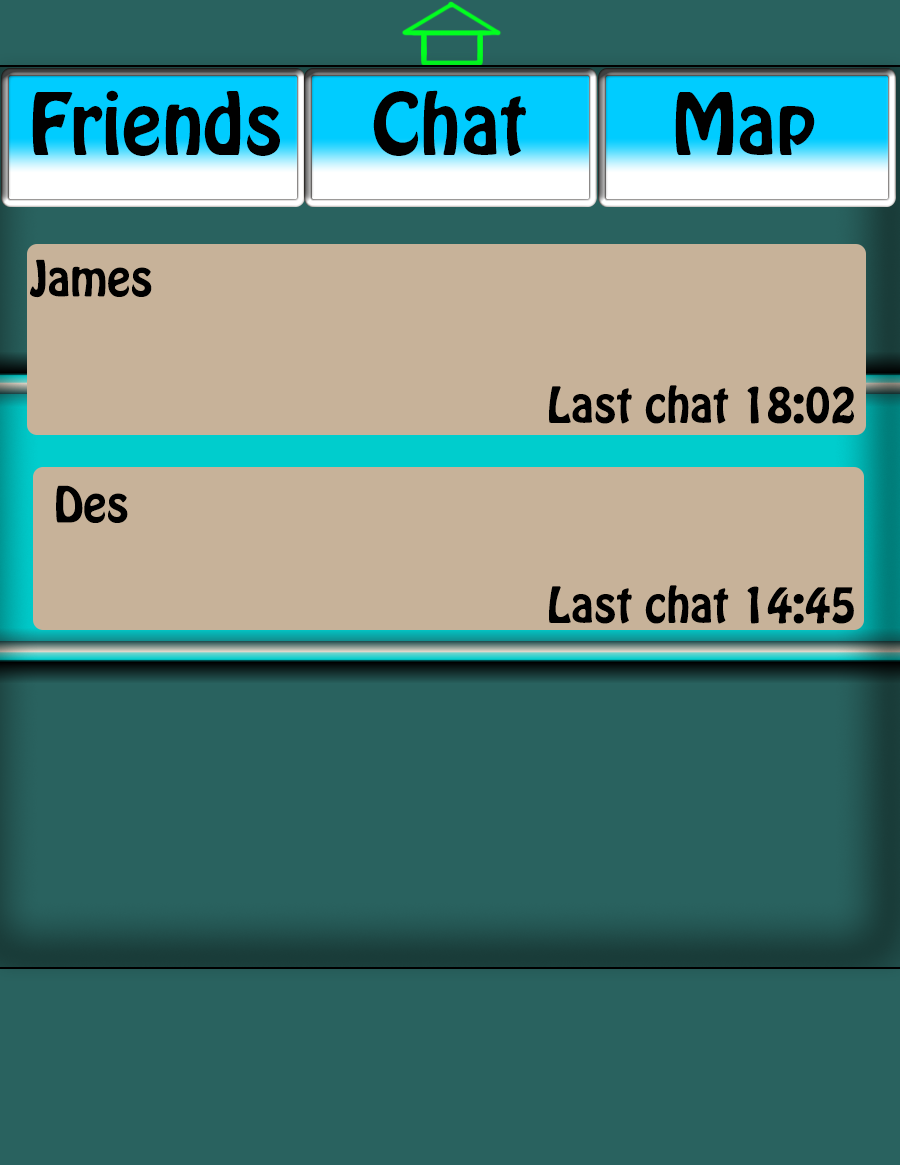
<style>
.page{position:relative;width:900px;height:1165px;background:#29625f}
.page>*{position:absolute;margin:0}
.t1{font:75.1px "HoboStd";color:#000000}
.t2{font:43.8px "HoboStd";color:#000000}
</style>
<div class="page">
<p class="t1" style="left:32px;top:90px;width:248px;height:66px">Friends</p>
<p class="t1" style="left:373px;top:90px;width:153px;height:66px">Chat</p>
<p class="t1" style="left:675px;top:92px;width:140px;height:63px">Map</p>
<p class="t2" style="left:30px;top:259px;width:122px;height:39px">James</p>
<p class="t2" style="left:549px;top:385px;width:305px;height:39px">Last chat 18:02</p>
<p class="t2" style="left:56px;top:485px;width:72px;height:38px">Des</p>
<p class="t2" style="left:549px;top:585px;width:305px;height:39px">Last chat 14:45</p>
</div>
